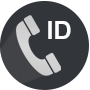
<style>
.page{position:relative;width:90px;height:90px;background:#32353a}
.page>*{position:absolute;margin:0}
.t1{font:25px "Arial-BoldMT";color:#ffffff}
</style>
<div class="page">
<p class="t1" style="left:48px;top:21px;width:23px;height:18px">ID</p>
</div>
